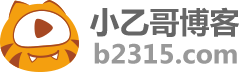
<style>
.page{position:relative;width:240px;height:72px;background:#ffffff}
.page>*{position:absolute;margin:0}
.t1{font:30px "MicrosoftYaHei-Bold";color:#666666}
.t2{font:28px "SegoeUI-Bold";color:#999999}
</style>
<div class="page">
<p class="t1" style="left:90px;top:7px;width:149px;height:30px">小乙哥博客</p>
<p class="t2" style="left:94px;top:42px;width:143px;height:22px">b2315.com</p>
</div>
